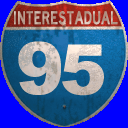
<style>
.page{position:relative;width:128px;height:128px}
.page>*{position:absolute;margin:0}
.t1{font:19.2px "HighwayGothic";letter-spacing:0.02em;color:#ba9e8f;scale:0.78 1}
</style>
<div class="page">
<p class="t1" style="left:14px;top:11px;width:104px;height:14px">INTERESTADUAL</p>
</div>
